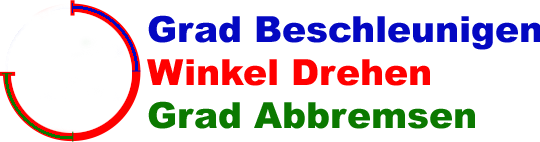
<style>
.page{position:relative;width:540px;height:142px;background:#ffffff}
.page>*{position:absolute;margin:0}
.t1{font:36px "Arial-Black";color:#0408c2}
.t2{font:36px "Arial-Black";color:#ff0000}
.t3{font:36px "Arial-Black";color:#0b7900}
</style>
<div class="page">
<p class="t1" style="left:147px;top:15px;width:394px;height:114px">Grad Beschleunigen<br><span class="t2">Winkel Drehen<br></span><span class="t3">Grad Abbremsen</span></p>
</div>
